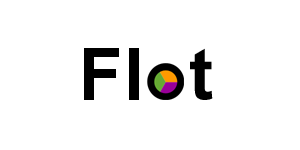
<style>
.page{position:relative;width:300px;height:150px;background:#ffffff}
.page>*{position:absolute;margin:0}
.t1{font:72px "Arial-BoldMT";letter-spacing:0.01em;color:#000000}
</style>
<div class="page">
<p class="t1" style="left:84px;top:48px;width:55px;height:52px">Fl</p>
<p class="t1" style="left:190px;top:48px;width:23px;height:52px">t</p>
</div>
